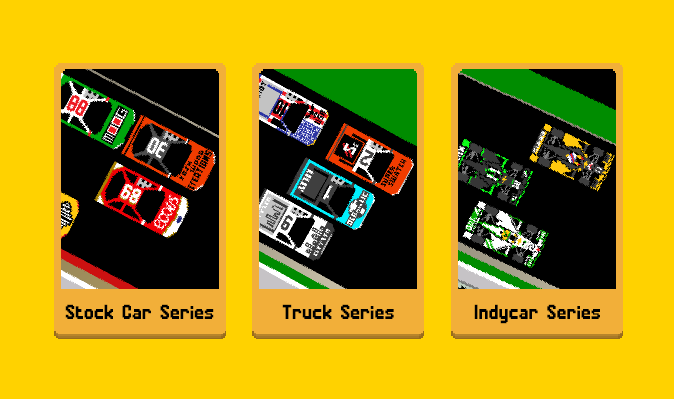
<style>
.page{position:relative;width:674px;height:399px;background:#ffd200}
.page>*{position:absolute;margin:0}
.t1{font:20px "Leaderboard";color:#000000}
</style>
<div class="page">
<p class="t1" style="left:65px;top:304px;width:149px;height:15px">Stock Car Series</p>
<p class="t1" style="left:282px;top:304px;width:112px;height:15px">Truck Series</p>
<p class="t1" style="left:474px;top:304px;width:126px;height:20px">Indycar Series</p>
</div>
